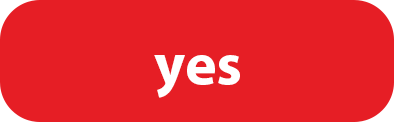
<style>
.page{position:relative;width:394px;height:122px;background:#e61e25}
.page>*{position:absolute;margin:0}
.t1{font:60px "MyriadPro-Bold";color:#ffffff}
</style>
<div class="page">
<p class="t1" style="left:154px;top:55px;width:86px;height:43px">yes</p>
</div>
